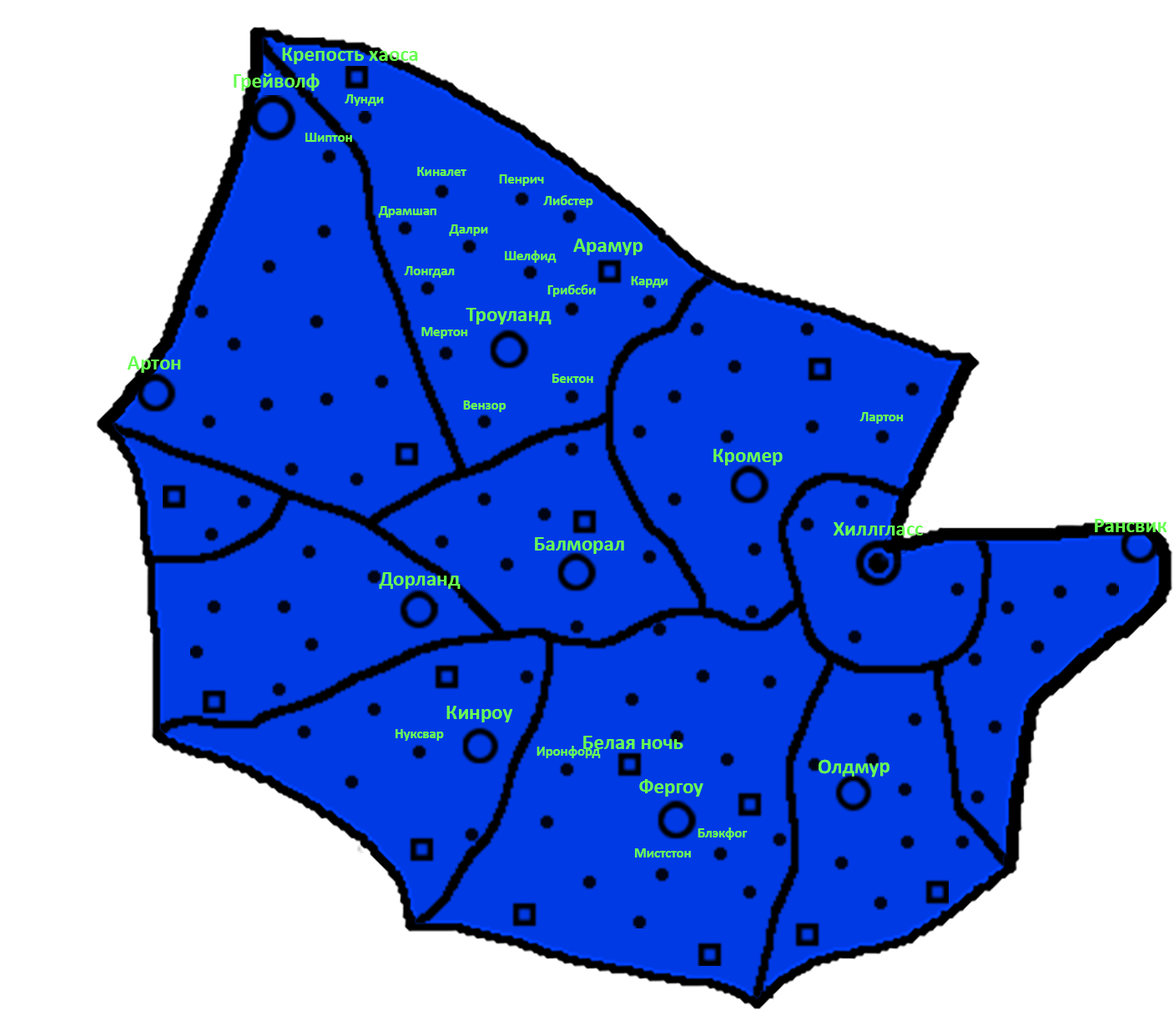
<style>
.page{position:relative;width:1174px;height:1016px;background:#ffffff}
.page>*{position:absolute;margin:0}
.t1{font:20.9px "Calibri-Bold";color:#67ff50}
.t2{font:13.9px "Calibri-Bold";color:#67ff50}
</style>
<div class="page">
<p class="t1" style="left:282px;top:48px;width:136px;height:16px">Крепость хаоса</p>
<p class="t1" style="left:234px;top:73px;width:85px;height:18px">Грейволф</p>
<p class="t2" style="left:345px;top:94px;width:39px;height:12px">Лунди</p>
<p class="t2" style="left:305px;top:133px;width:47px;height:9px">Шиптон</p>
<p class="t2" style="left:417px;top:167px;width:49px;height:9px">Киналет</p>
<p class="t2" style="left:499px;top:174px;width:45px;height:12px">Пенрич</p>
<p class="t2" style="left:543px;top:195px;width:50px;height:13px">Либстер</p>
<p class="t2" style="left:378px;top:206px;width:58px;height:12px">Драмшап</p>
<p class="t2" style="left:449px;top:224px;width:39px;height:12px">Далри</p>
<p class="t1" style="left:573px;top:239px;width:69px;height:16px">Арамур</p>
<p class="t2" style="left:505px;top:250px;width:51px;height:13px">Шелфид</p>
<p class="t2" style="left:404px;top:266px;width:51px;height:12px">Лонгдал</p>
<p class="t2" style="left:631px;top:276px;width:36px;height:12px">Карди</p>
<p class="t2" style="left:547px;top:284px;width:49px;height:13px">Грибсби</p>
<p class="t1" style="left:465px;top:308px;width:86px;height:16px">Троуланд</p>
<p class="t2" style="left:421px;top:327px;width:47px;height:12px">Мертон</p>
<p class="t1" style="left:127px;top:356px;width:54px;height:17px">Артон</p>
<p class="t2" style="left:552px;top:374px;width:41px;height:9px">Бектон</p>
<p class="t2" style="left:463px;top:400px;width:43px;height:12px">Вензор</p>
<p class="t2" style="left:859px;top:412px;width:44px;height:12px">Лартон</p>
<p class="t1" style="left:713px;top:449px;width:69px;height:16px">Кромер</p>
<p class="t1" style="left:1094px;top:519px;width:73px;height:13px">Рансвик</p>
<p class="t1" style="left:833px;top:522px;width:90px;height:14px">Хиллгласс</p>
<p class="t1" style="left:535px;top:537px;width:89px;height:17px">Балморал</p>
<p class="t1" style="left:379px;top:572px;width:81px;height:17px">Дорланд</p>
<p class="t1" style="left:446px;top:706px;width:67px;height:16px">Кинроу</p>
<p class="t2" style="left:395px;top:729px;width:49px;height:12px">Нуксвар</p>
<p class="t1" style="left:583px;top:736px;width:100px;height:13px">Белая ночь</p>
<p class="t2" style="left:536px;top:746px;width:65px;height:12px">Иронфорд</p>
<p class="t1" style="left:818px;top:759px;width:71px;height:18px;rotate:-1deg">Олдмур</p>
<p class="t1" style="left:639px;top:779px;width:64px;height:18px">Фергоу</p>
<p class="t2" style="left:697px;top:827px;width:50px;height:13px">Блэкфог</p>
<p class="t2" style="left:635px;top:848px;width:56px;height:10px">Мистстон</p>
</div>
